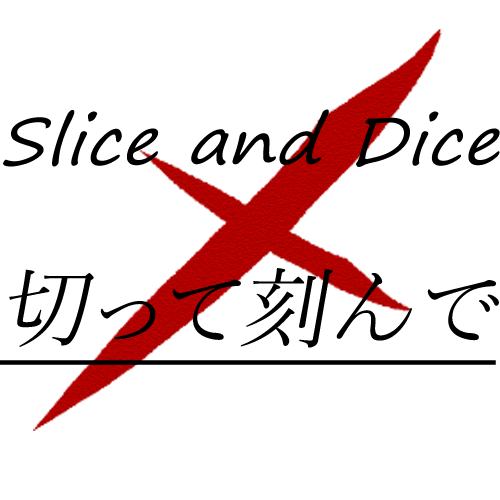
<style>
.page{position:relative;width:500px;height:500px;background:#ffffff}
.page>*{position:absolute;margin:0}
.t1{font:65.3px "SegoePrint";color:#000000;font-style:italic;scale:1.08 1}
.t2{font:89.1px "YuMincho-Regular";color:#000000;font-style:italic;text-decoration:underline}
</style>
<div class="page">
<p class="t1" style="left:3px;top:109px;width:497px;height:58px">Slice and Dice</p>
<p class="t2" style="left:0px;top:268px;width:499px;height:97px">切って刻んで</p>
</div>
